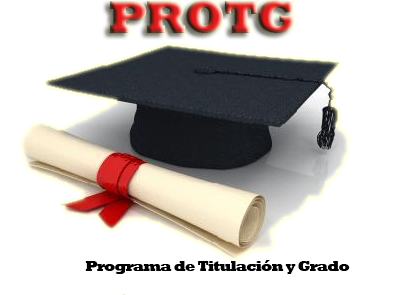
<style>
.page{position:relative;width:395px;height:295px;background:#ffffff}
.page>*{position:absolute;margin:0}
.t1{font:48px "Rockwell-ExtraBold";letter-spacing:-0.05em}
.t2{font:14.7px "Rockwell-ExtraBold";letter-spacing:-0.05em;color:#000000}
</style>
<div class="page">
<p class="t1" style="left:110px;top:0px;width:185px;height:33px">PROTG</p>
<p class="t2" style="left:85px;top:260px;width:265px;height:14px">Programa de Titulación y Grado</p>
</div>
